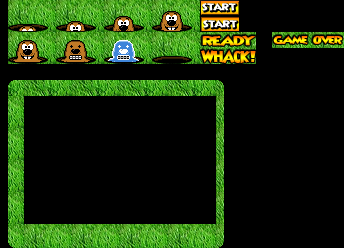
<style>
.page{position:relative;width:344px;height:248px;background:#000000}
.page>*{position:absolute;margin:0}
.t1{font:9.6px "Shermlock";letter-spacing:-0.01em;color:#fefefe;scale:1.67 1}
.t2{font:9.5px "Shermlock";letter-spacing:-0.05em;scale:1.98 1}
</style>
<div class="page">
<p class="t1" style="left:202px;top:3px;width:34px;height:8px">start</p>
<p class="t1" style="left:203px;top:20px;width:34px;height:8px">start</p>
<p class="t2" style="left:273px;top:36px;width:70px;height:8px">GAme Over</p>
</div>
